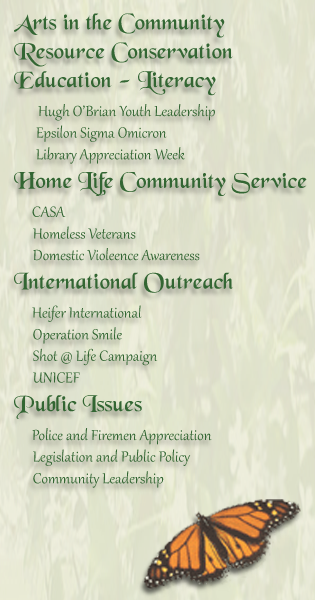
<style>
.page{position:relative;width:315px;height:600px}
.page>*{position:absolute;margin:0}
.t1{font:18px "Gabriola";color:#336633}
.t2{font:24px "BlackChancery";color:#336633}
</style>
<div class="page">
<p class="t1" style="left:14px;top:13px;width:293px;height:475px"><span class="t2"><br><br>Arts in the Community<br>Resource Conservation<br>Education - Literacy<br>    </span>Hugh O’Brian Youth Leadership<br>       Epsilon Sigma Omicron<br>       Library Appreciation Week<br><span class="t2">Home Life Community Service<br>   </span>CASA<br>      Homeless Veterans<br>      Domestic Violeence Awareness<br><span class="t2">International Outreach<br>   </span>Heifer International<br>      Operation Smile<br>      Shot @ Life Campaign<br>      UNICEF<br><span class="t2">Public Issues<br>   </span>Police and Firemen Appreciation<br>      Legislation and Public Policy<br>      Community Leadership</p>
</div>
